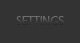
<style>
.page{position:relative;width:80px;height:43px;background:#333333}
.page>*{position:absolute;margin:0}
.t1{font:12px "MyriadPro-Regular"}
</style>
<div class="page">
<p class="t1" style="left:16px;top:16px;width:48px;height:9px">SETTINGS</p>
</div>
